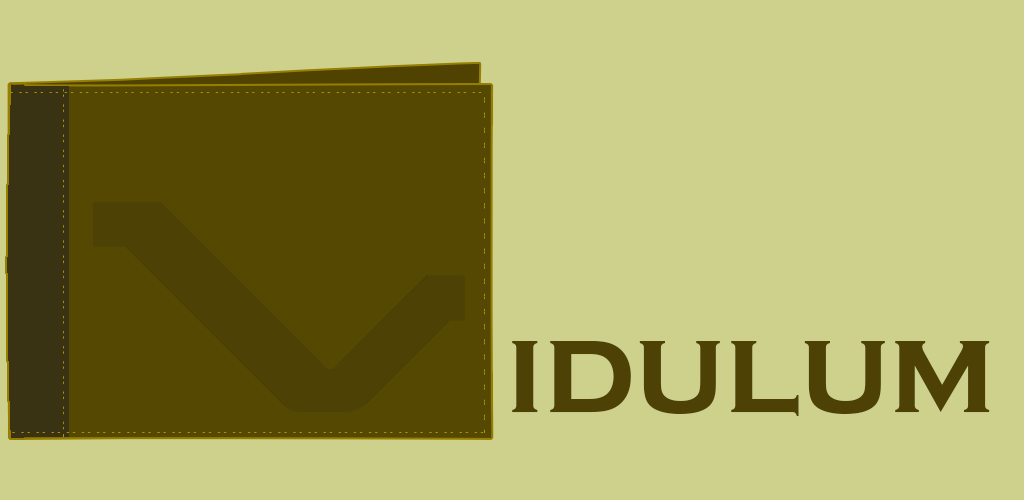
<style>
.page{position:relative;width:1024px;height:500px;background:#cdd18b}
.page>*{position:absolute;margin:0}
.t1{font:130px "CopperplateGothic-Bold";color:#4d4105}
</style>
<div class="page">
<p class="t1" style="left:512px;top:341px;width:478px;height:75px">idulum</p>
</div>
